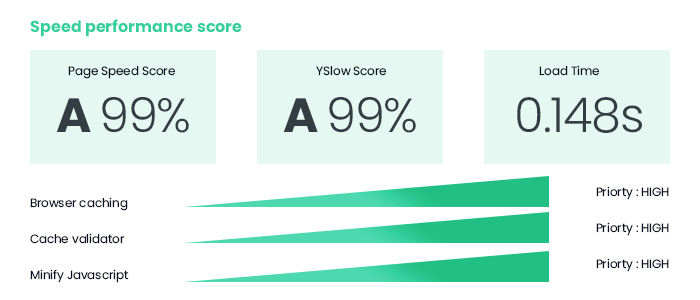
<style>
.page{position:relative;width:700px;height:300px;background:#ffffff}
.page>*{position:absolute;margin:0}
.t1{font:16px "Poppins-Bold";color:#33cf9d}
.t2{font:12px "Poppins-Regular";letter-spacing:-0.01em;color:#080f20}
.t3{font:48px "Poppins-Light";letter-spacing:-0.025em;color:#343c44}
.t4{font:48px "Poppins-Bold";letter-spacing:-0.025em;color:#343c44}
.t5{font:12px/36px "Poppins-Regular";letter-spacing:-0.01em;color:#080f20}
</style>
<div class="page">
<p class="t1" style="left:30px;top:19px;width:212px;height:18px">Speed performance score</p>
<p class="t2" style="left:539px;top:65px;width:60px;height:11px">Load Time</p>
<p class="t2" style="left:68px;top:66px;width:107px;height:13px">Page Speed Score</p>
<p class="t2" style="left:316px;top:66px;width:70px;height:10px">YSlow Score</p>
<p class="t3" style="left:56px;top:97px;width:133px;height:36px"><span class="t4">A </span>99%</p>
<p class="t3" style="left:283px;top:97px;width:133px;height:36px"><span class="t4">A </span>99%</p>
<p class="t3" style="left:517px;top:97px;width:125px;height:36px">0.148s</p>
<p class="t5" style="left:30px;top:197px;width:99px;height:86px">Browser caching<br>Cache validator<br>Minify Javascript</p>
<p class="t5" style="left:596px;top:186px;width:73px;height:86px">Priorty : HIGH<br>Priorty : HIGH<br>Priorty : HIGH</p>
</div>
